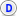
<style>
.page{position:relative;width:17px;height:16px}
.page>*{position:absolute;margin:0}
.t1{font:11px "Menlo-Bold";color:#0018ff}
</style>
<div class="page">
<p class="t1" style="left:6px;top:4px;width:6px;height:8px">D</p>
</div>
